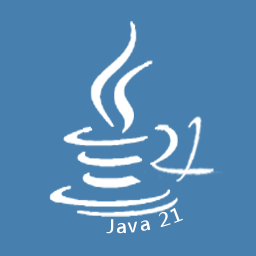
<style>
.page{position:relative;width:256px;height:256px;background:#4780ae}
.page>*{position:absolute;margin:0}
.t1{font:18px "MicrosoftYaHei";letter-spacing:0.08em;color:#ffffff}
</style>
<div class="page">
<p class="t1" style="left:106px;top:207px;width:77px;height:27px;rotate:-10deg">Java 21</p>
</div>
